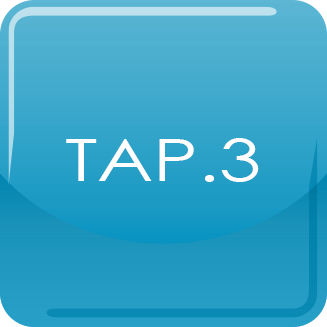
<style>
.page{position:relative;width:327px;height:327px}
.page>*{position:absolute;margin:0}
.t1{font:58.3px "CenturyGothic";color:#ffffff;scale:1.3 1}
</style>
<div class="page">
<p class="t1" style="left:66px;top:138px;width:193px;height:44px">TAP.3</p>
</div>
